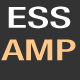
<style>
.page{position:relative;width:80px;height:80px;background:#333333}
.page>*{position:absolute;margin:0}
.t1{font:29.1px/32.5px "HelveticaNeueLTStd-MdCn";color:#ffffff;scale:1.47 1}
.t2{font:29.1px/32.5px "HelveticaNeueLTStd-MdCn";color:#ffc888;scale:1.47 1}
</style>
<div class="page">
<p class="t1" style="left:1px;top:6px;width:75px;height:55px;text-align:center">ESS<br><span class="t2">AMP</span></p>
</div>
